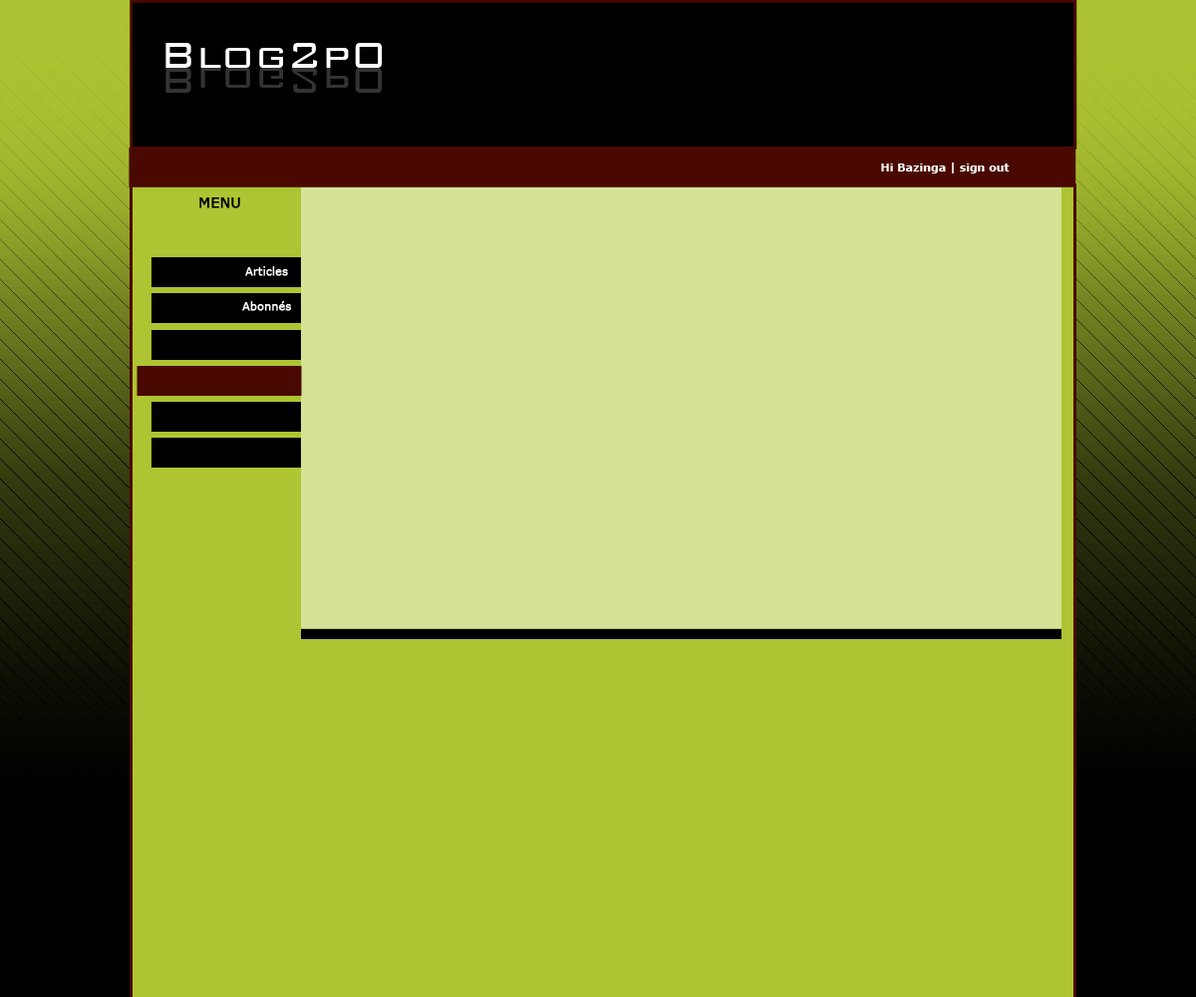
<style>
.page{position:relative;width:1196px;height:997px;background:#aec432}
.page>*{position:absolute;margin:0}
.t1{font:47.8px "BankGothic-Light";color:#ffffff}
.t2{font:47.8px "BankGothic-Light";color:#333333}
.t3{font:11px "Verdana-Bold";color:#ffffff}
.t4{font:14px "Verdana";color:#000000;font-weight:bold}
.t5{font:11px "Verdana";color:#ffffff;font-weight:bold}
</style>
<div class="page">
<p class="t1" style="left:165px;top:43px;width:218px;height:25px">Blog2p0</p>
<p class="t2" style="left:165px;top:68px;width:218px;height:25px">Blog2p0</p>
<p class="t3" style="left:881px;top:162px;width:129px;height:11px">Hi Bazinga | sign out</p>
<p class="t4" style="left:199px;top:197px;width:41px;height:11px">MENU</p>
<p class="t5" style="left:245px;top:266px;width:43px;height:10px">Articles</p>
<p class="t5" style="left:242px;top:301px;width:49px;height:10px">Abonnés</p>
</div>
